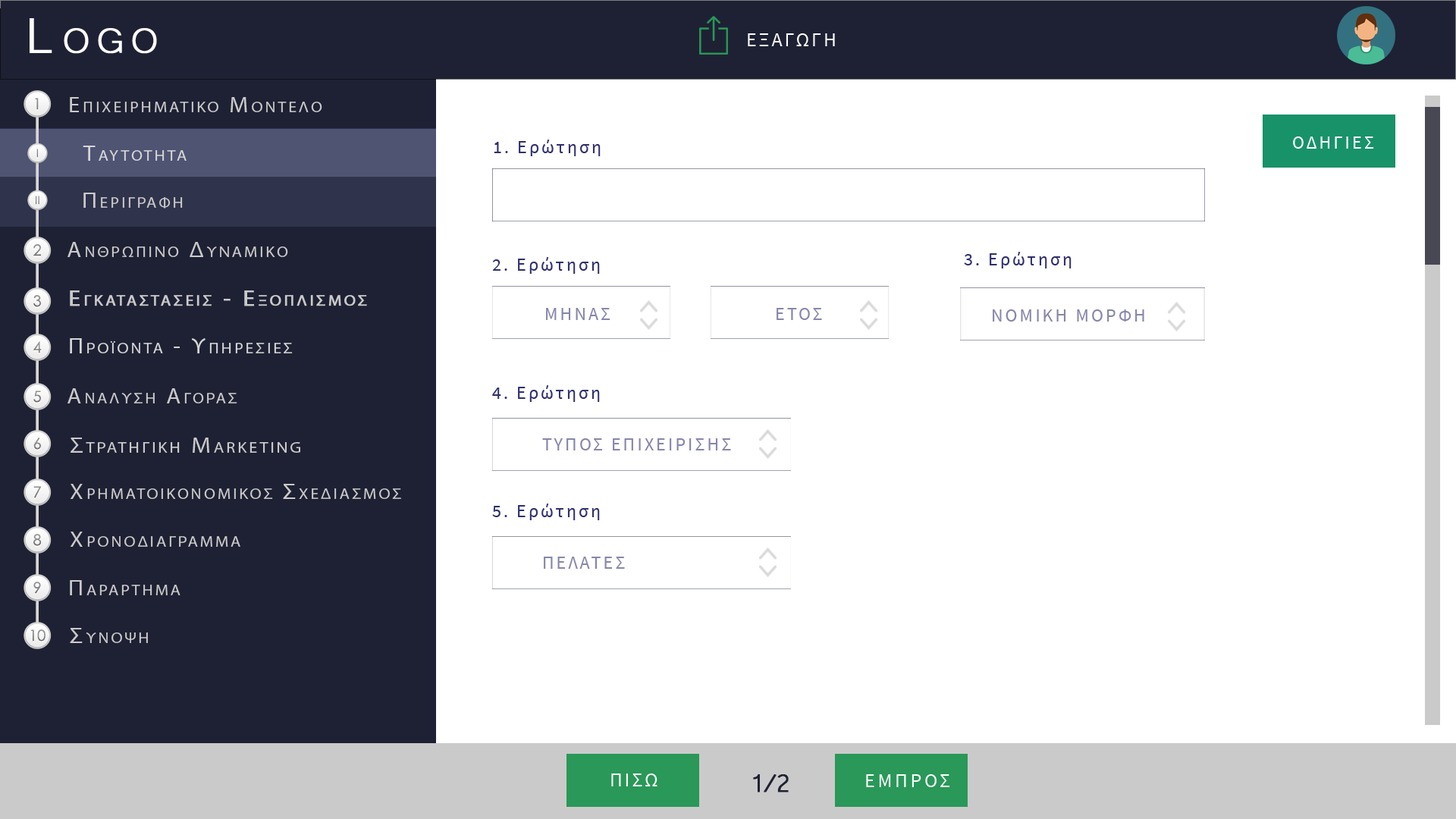
<style>
.page{position:relative;width:1456px;height:819px;background:#ffffff}
.page>*{position:absolute;margin:0}
.t1{font:63.7px "Microsoft-Yi-Baiti";letter-spacing:0.13em;color:#ffffff;font-variant:small-caps;font-weight:bold}
.t2{font:20px "SourceSansPro-Regular";letter-spacing:0.1em;color:#fefefe;text-transform:uppercase}
.t3{font:15.3px "CenturyGothic";color:#868686}
.t4{font:21.7px "MyriadPro-Regular";letter-spacing:0.13em;color:#cbcaca;font-variant:small-caps;scale:1.09 1}
.t5{font:23.4px "Microsoft-Yi-Baiti";letter-spacing:0.13em;color:#cbcaca;font-variant:small-caps;font-weight:bold}
.t6{font:18.2px "SourceSansPro-Regular";letter-spacing:0.13em;color:#ffffff;text-transform:uppercase}
.t7{font:11.2px "CenturyGothic";color:#808080}
.t8{font:21.7px "MyriadPro-Regular";letter-spacing:0.13em;color:#d6d6d6;font-variant:small-caps;scale:1.09 1}
.t9{font:18.2px "SourceSansPro-Regular";letter-spacing:0.13em;color:#2f2f70}
.t10{font:18.2px "SourceSansPro-Regular";letter-spacing:0.13em;color:#2f2f70;text-transform:uppercase}
.t11{font:11.2px "CenturyGothic";color:#828282}
.t12{font:15.3px "CenturyGothic";color:#7d7d7d}
.t13{font:21.7px/91px "MyriadPro-Regular";letter-spacing:0.13em;color:#cbcaca;font-variant:small-caps;font-weight:bold;scale:1.09 1}
.t14{font:23.4px/91px "Microsoft-Yi-Baiti";letter-spacing:0.13em;color:#cbcaca;font-variant:small-caps;font-weight:bold}
.t15{font:15.3px "CenturyGothic";color:#8b8b8b}
.t16{font:18.2px "SourceSansPro-Regular";letter-spacing:0.13em;color:#8686ac;text-transform:uppercase}
.t17{font:15.3px "CenturyGothic";color:#878787}
.t18{font:23.4px "Microsoft-Yi-Baiti";letter-spacing:0.13em;color:#d6d6d6;font-variant:small-caps;font-weight:bold}
.t19{font:15.3px "CenturyGothic";color:#898989}
.t20{font:15.3px "CenturyGothic";color:#838383}
.t21{font:22.2px "MyriadPro-Regular";letter-spacing:0.13em;color:#cbcaca;font-variant:small-caps;scale:1.09 1}
.t22{font:25.5px "Microsoft-Yi-Baiti";letter-spacing:0.13em;color:#cbcaca;font-variant:small-caps;font-weight:bold}
.t23{font:15.3px "CenturyGothic";color:#888888}
.t24{font:23.7px "Microsoft-Yi-Baiti";letter-spacing:0.13em;color:#cbcaca;font-variant:small-caps;scale:1.09 1}
.t25{font:32.8px "Microsoft-Yi-Baiti";letter-spacing:-0.1em;color:#1e2133;font-weight:bold}
.t26{font:20px "SourceSansPro-Regular";letter-spacing:0.13em;color:#fefefe;text-transform:uppercase}
</style>
<div class="page">
<p class="t1" style="left:30px;top:18px;width:127px;height:36px">Logo</p>
<p class="t2" style="left:748px;top:33px;width:87px;height:13px">εξαγωγη</p>
<p class="t3" style="left:35px;top:98px;width:4px;height:12px">1</p>
<p class="t4" style="left:70px;top:97px;width:252px;height:15px"><span class="t5">   </span>Επιχειρηματικο Μοντελο</p>
<p class="t6" style="left:1293px;top:136px;width:81px;height:13px">Οδηγιεσ</p>
<p class="t7" style="left:36px;top:149px;width:2px;height:9px">I</p>
<p class="t8" style="left:83px;top:146px;width:104px;height:15px">Taytothta</p>
<p class="t9" style="left:494px;top:140px;width:107px;height:16px"><span class="t10">1. </span>Ερώτηση</p>
<p class="t11" style="left:36px;top:196px;width:3px;height:9px">II</p>
<p class="t4" style="left:83px;top:193px;width:100px;height:16px">Περιγραφη</p>
<p class="t12" style="left:33px;top:244px;width:8px;height:12px">2</p>
<p class="t4" style="left:67px;top:242px;width:221px;height:15px"><span class="t5">   </span>Ανθρωπινο Δυναμικο</p>
<p class="t9" style="left:492px;top:257px;width:108px;height:17px"><span class="t10">2. </span>Ερώτηση</p>
<p class="t13" style="left:70px;top:290px;width:297px;height:16px"><span class="t14">   </span>Εγκαταστασεισ - Εξοπλισμοσ<br><br><span class="t14">Equipment</span></p>
<p class="t15" style="left:33px;top:295px;width:8px;height:12px">3</p>
<p class="t16" style="left:546px;top:308px;width:64px;height:12px">μηνασ</p>
<p class="t16" style="left:777px;top:308px;width:45px;height:12px">ΕΤΟΣ</p>
<p class="t17" style="left:33px;top:341px;width:9px;height:12px">4</p>
<p class="t8" style="left:70px;top:338px;width:223px;height:15px"><span class="t18">   </span>Προϊοντα - Υπηρεσιεσ</p>
<p class="t4" style="left:67px;top:388px;width:170px;height:15px"><span class="t5">   </span>Αναλυση Αγορασ</p>
<p class="t9" style="left:492px;top:385px;width:108px;height:17px"><span class="t10">4. </span>Ερώτηση</p>
<p class="t19" style="left:33px;top:391px;width:8px;height:12px">5</p>
<p class="t20" style="left:33px;top:438px;width:8px;height:12px">6</p>
<p class="t21" style="left:71px;top:438px;width:229px;height:15px"><span class="t22">   </span>Στρατηγικη Marketing</p>
<p class="t16" style="left:542px;top:438px;width:189px;height:12px">ΤΥΠΟΣ ΕΠΙΧΕΙΡΙΣΗΣ</p>
<p class="t4" style="left:70px;top:484px;width:331px;height:15px"><span class="t22">   </span>Χρηματοικονομικοσ Σχεδιασμοσ</p>
<p class="t23" style="left:33px;top:486px;width:9px;height:12px">7</p>
<p class="t9" style="left:492px;top:504px;width:108px;height:16px"><span class="t10">5. </span>Ερώτηση</p>
<p class="t15" style="left:33px;top:534px;width:9px;height:12px">8</p>
<p class="t4" style="left:70px;top:532px;width:170px;height:15px"><span class="t22">   </span>Χρονοδιαγραμμα</p>
<p class="t16" style="left:544px;top:557px;width:81px;height:12px">Πελατεσ</p>
<p class="t20" style="left:33px;top:582px;width:8px;height:12px">9</p>
<p class="t4" style="left:70px;top:580px;width:110px;height:15px"><span class="t24">   </span>Παραρτημα</p>
<p class="t17" style="left:30px;top:629px;width:15px;height:13px">10</p>
<p class="t4" style="left:70px;top:628px;width:78px;height:15px"><span class="t24">   </span>Συνοψη</p>
<p class="t2" style="left:611px;top:773px;width:46px;height:13px">Πισω</p>
<p class="t25" style="left:753px;top:774px;width:36px;height:18px">1/2</p>
<p class="t26" style="left:866px;top:774px;width:83px;height:13px">εμπροσ</p>
</div>
